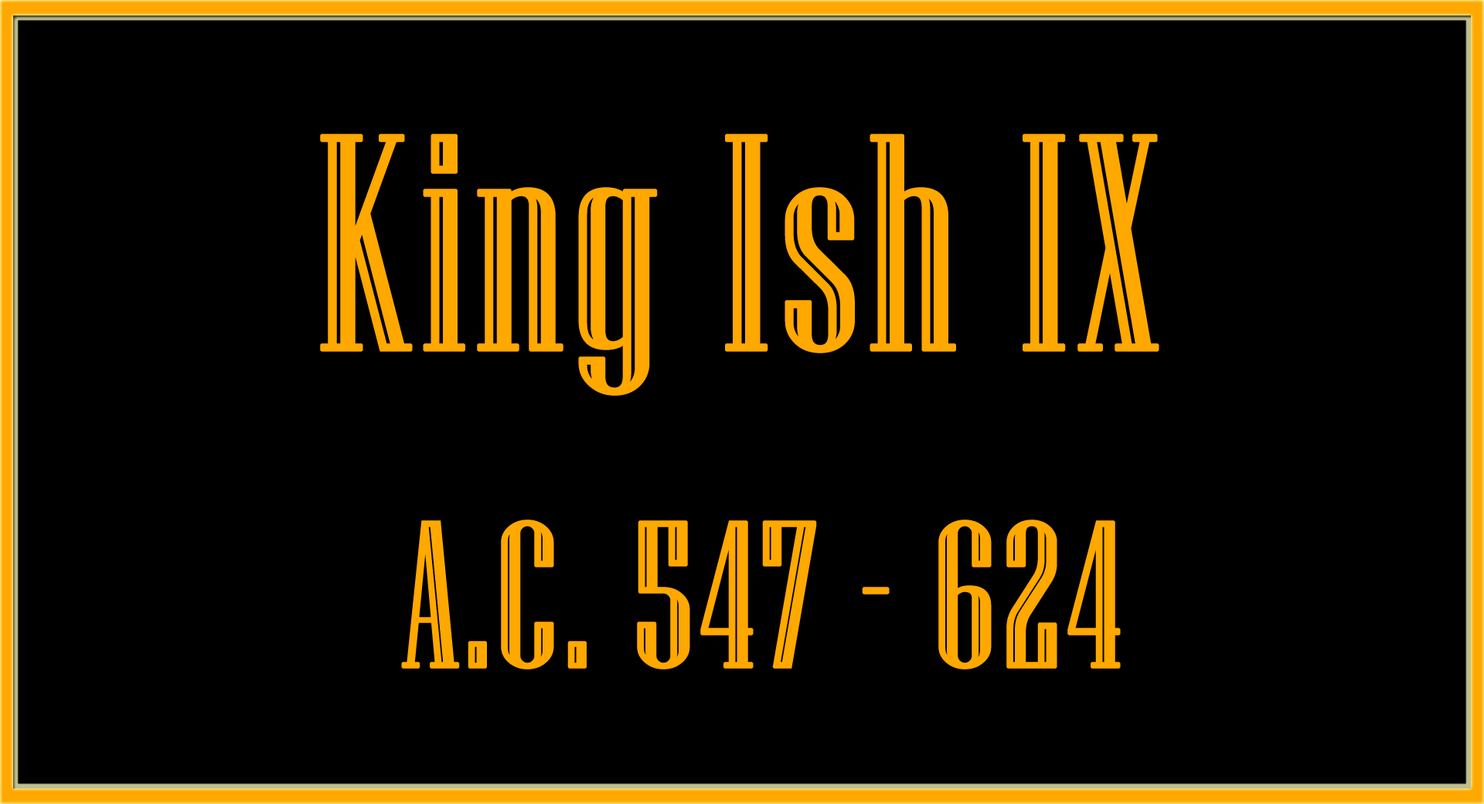
<style>
.page{position:relative;width:1484px;height:804px;background:#000000}
.page>*{position:absolute;margin:0}
.t1{font:307.8px "NiagaraEngraved-Reg";color:#ffa800;font-weight:bold}
.t2{font:207.8px "NiagaraEngraved-Reg";color:#ffa800;font-weight:bold}
</style>
<div class="page">
<p class="t1" style="left:320px;top:134px;width:839px;height:262px">King Ish IX</p>
<p class="t2" style="left:401px;top:519px;width:720px;height:150px">A.C. 547 - 624</p>
</div>
